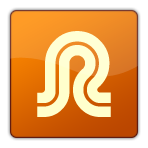
<style>
.page{position:relative;width:148px;height:148px}
.page>*{position:absolute;margin:0}
.t1{font:88px "RetroStereoWide";letter-spacing:-0.01em;color:#ffffcc}
</style>
<div class="page">
<p class="t1" style="left:37px;top:31px;width:74px;height:86px">r</p>
</div>
